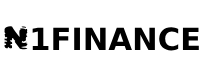
<style>
.page{position:relative;width:200px;height:79px;background:#ffffff}
.page>*{position:absolute;margin:0}
.t1{font:30.6px "Candara-Bold";color:#000000;text-transform:uppercase}
.t2{font:30.6px "AfterShok";color:#000000;text-transform:uppercase}
</style>
<div class="page">
<p class="t1" style="left:4px;top:26px;width:195px;height:25px"><span class="t2">N</span>1Finance</p>
</div>
